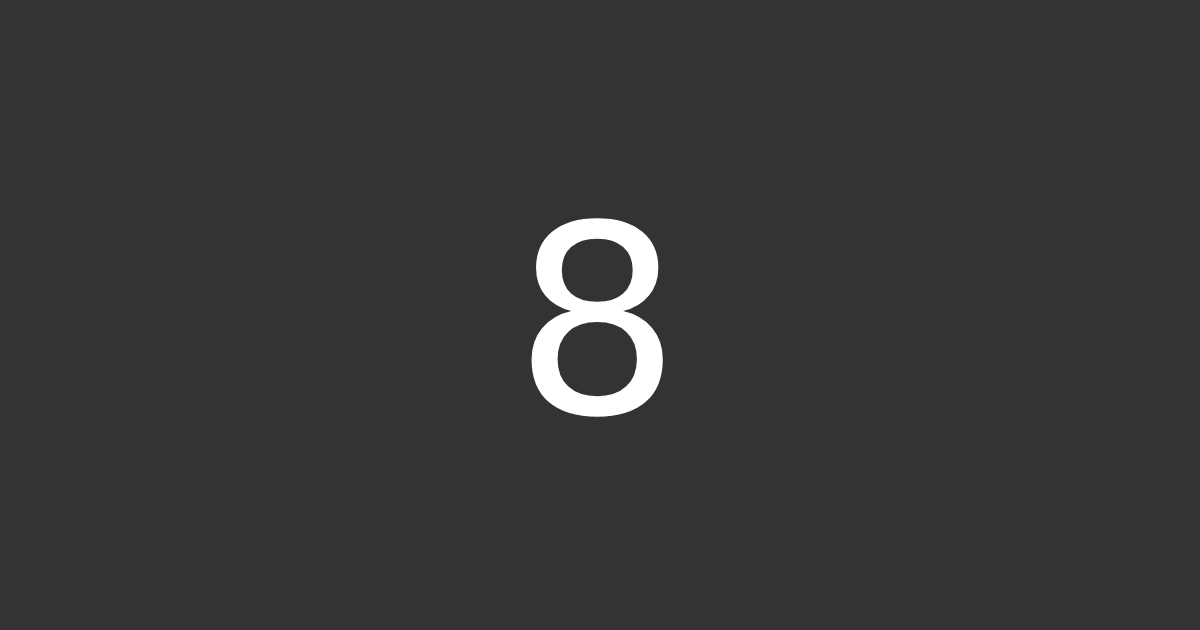
<style>
.page{position:relative;width:1200px;height:630px;background:#333333}
.page>*{position:absolute;margin:0}
.t1{font:262.5px "DejaVuSans";color:#ffffff}
</style>
<div class="page">
<p class="t1" style="left:531px;top:218px;width:132px;height:199px">8</p>
</div>
